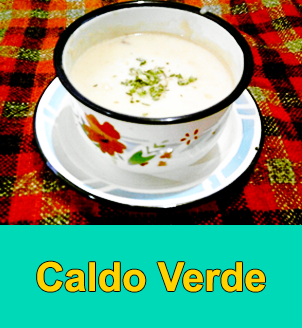
<style>
.page{position:relative;width:302px;height:328px;background:#00d9b8}
.page>*{position:absolute;margin:0}
.t1{font:40px "Arial-BoldMT";color:#ffd200}
</style>
<div class="page">
<p class="t1" style="left:37px;top:261px;width:228px;height:31px">Caldo Verde</p>
</div>
